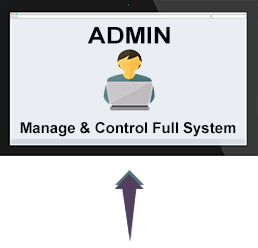
<style>
.page{position:relative;width:258px;height:248px;background:#eaedf1}
.page>*{position:absolute;margin:0}
.t1{font:23.1px "Arial-BoldMT";color:#00040a;scale:1.1 1}
.t2{font:15px "Arial-BoldMT";color:#00040a}
</style>
<div class="page">
<p class="t1" style="left:87px;top:27px;width:83px;height:17px">ADMIN</p>
<p class="t2" style="left:20px;top:122px;width:216px;height:15px">Manage &amp; Control Full System</p>
</div>
